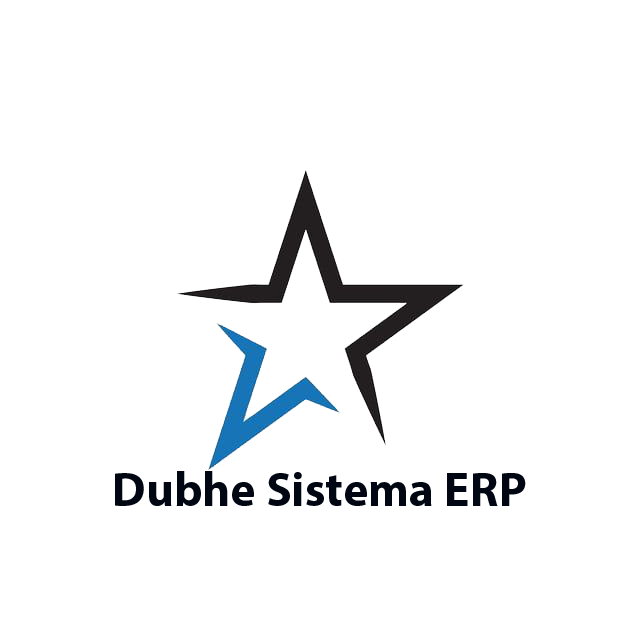
<style>
.page{position:relative;width:640px;height:640px;background:#ffffff}
.page>*{position:absolute;margin:0}
.t1{font:48px "MyriadPro-Bold";color:#000713}
</style>
<div class="page">
<p class="t1" style="left:115px;top:471px;width:411px;height:35px">Dubhe Sistema ERP</p>
</div>
